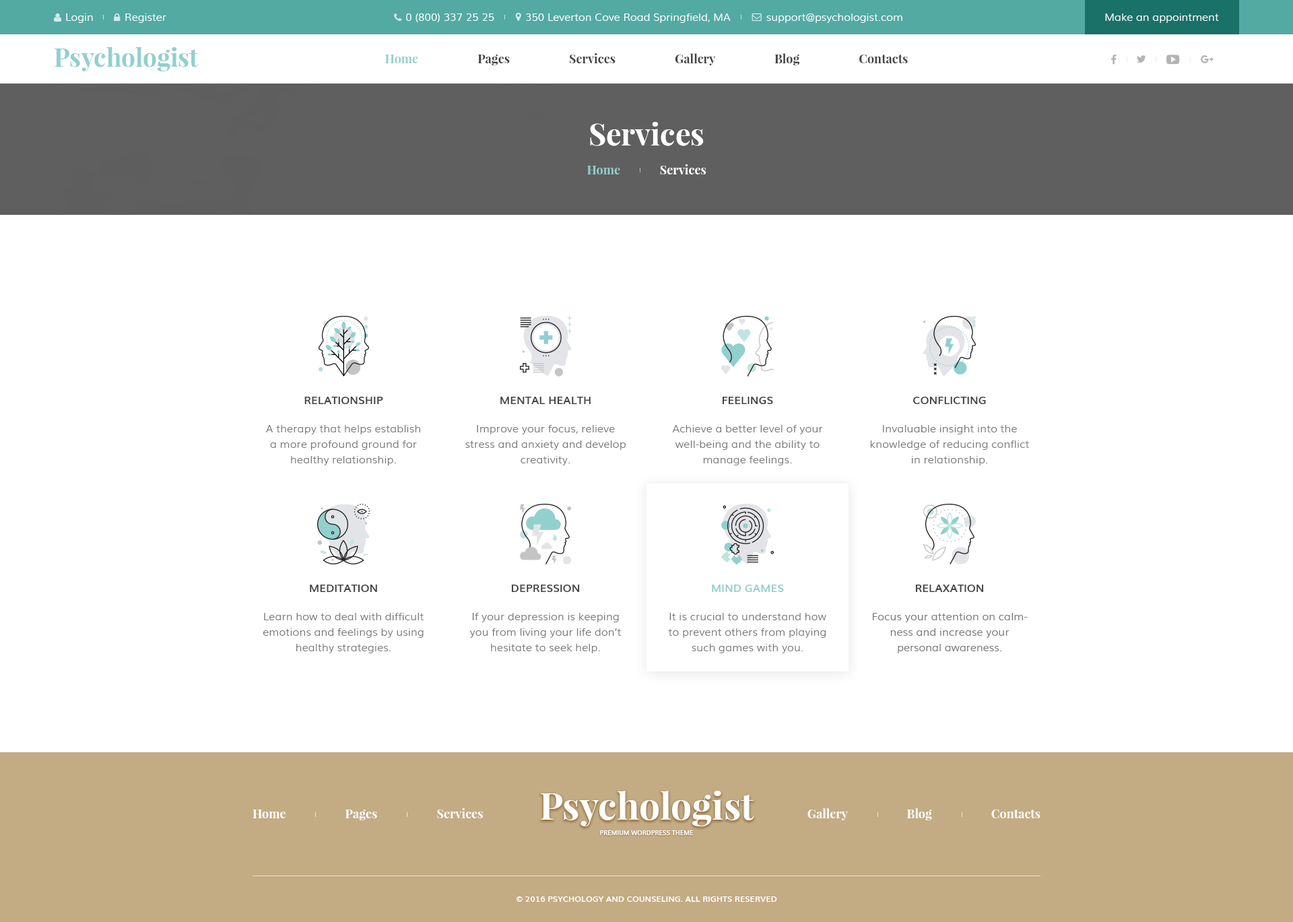
<style>
.page{position:relative;width:1293px;height:922px;background:#ffffff}
.page>*{position:absolute;margin:0}
.t1{font:10.8px "Muli-Light";color:#ffffff}
.t2{font:24.9px "PlayfairDisplay-Bold";color:#91d0cc}
.t3{font:12.1px "PlayfairDisplay-Bold";color:#444444}
.t4{font:12.1px "PlayfairDisplay-Bold";color:#91d0cc}
.t5{font:30.3px "PlayfairDisplay-Bold";color:#ffffff}
.t6{font:12.1px "PlayfairDisplay-Bold";color:#ffffff}
.t7{font:10.8px "Muli-Bold";color:#444444;text-transform:uppercase}
.t8{font:10.8px/15.5px "Muli-Light";color:#787878}
.t9{font:10.8px "Muli-Bold";color:#91d0cc;text-transform:uppercase}
.t10{font:37px "PlayfairDisplay-Bold";color:#ffffff}
.t11{font:6.1px "Muli-Bold";color:#ffffff;text-transform:uppercase}
.t12{font:8.1px "Muli-Bold";color:#ffffff;text-transform:uppercase}
</style>
<div class="page">
<p class="t1" style="left:66px;top:13px;width:27px;height:10px">Login</p>
<p class="t1" style="left:125px;top:13px;width:41px;height:10px">Register</p>
<p class="t1" style="left:406px;top:13px;width:88px;height:9px">0 (800) 337 25 25</p>
<p class="t1" style="left:525px;top:13px;width:206px;height:10px">350 Leverton Cove Road Springfield, MA</p>
<p class="t1" style="left:766px;top:13px;width:137px;height:10px">support@psychologist.com</p>
<p class="t1" style="left:1105px;top:13px;width:114px;height:10px">Make an appointment</p>
<p class="t2" style="left:55px;top:46px;width:144px;height:25px">Psychologist</p>
<p class="t3" style="left:385px;top:53px;width:523px;height:12px"><span class="t4">Home</span>                     Pages                     Services                     Gallery                     Blog                     Contacts</p>
<p class="t5" style="left:590px;top:122px;width:114px;height:24px">Services</p>
<p class="t6" style="left:587px;top:164px;width:120px;height:10px"><span class="t4">Home              </span>Services</p>
<p class="t7" style="left:304px;top:397px;width:79px;height:7px">Relationship</p>
<p class="t7" style="left:500px;top:397px;width:91px;height:7px">mental health</p>
<p class="t7" style="left:722px;top:397px;width:51px;height:7px">feelings</p>
<p class="t7" style="left:913px;top:397px;width:73px;height:7px">conflicting</p>
<p class="t8" style="left:266px;top:425px;width:154px;height:40px;text-align:center">A therapy that helps establish a more profound ground for healthy relationship.</p>
<p class="t8" style="left:465px;top:425px;width:161px;height:40px;text-align:center">Improve your focus, relieve stress and anxiety and develop creativity.</p>
<p class="t8" style="left:672px;top:425px;width:151px;height:40px;text-align:center">Achieve a better level of your  well-being and the ability to manage feelings.</p>
<p class="t8" style="left:870px;top:425px;width:159px;height:40px;text-align:center">Invaluable insight into the knowledge of reducing conflict in relationship.</p>
<p class="t7" style="left:310px;top:585px;width:67px;height:7px">meditation</p>
<p class="t7" style="left:511px;top:585px;width:69px;height:7px">depression</p>
<p class="t9" style="left:712px;top:585px;width:72px;height:7px">mind games</p>
<p class="t7" style="left:915px;top:585px;width:69px;height:7px">relaxation</p>
<p class="t8" style="left:263px;top:613px;width:161px;height:40px;text-align:center">Learn how to deal with difficult emotions and feelings by using healthy strategies.</p>
<p class="t8" style="left:469px;top:613px;width:152px;height:40px;text-align:center">If your depression is keeping you from living your life don’t hesitate to seek help.</p>
<p class="t8" style="left:668px;top:613px;width:158px;height:40px;text-align:center">It is crucial to understand how to prevent others from playing such games with you.</p>
<p class="t8" style="left:873px;top:613px;width:155px;height:40px;text-align:center">Focus your attention on calmness and increase your<br>personal awareness.</p>
<p class="t10" style="left:540px;top:791px;width:214px;height:35px">Psychologist</p>
<p class="t6" style="left:253px;top:808px;width:230px;height:12px">Home                     Pages                     Services</p>
<p class="t6" style="left:808px;top:808px;width:233px;height:12px">Gallery                     Blog                     Contacts</p>
<p class="t11" style="left:600px;top:830px;width:94px;height:5px">Premium Wordpress Theme</p>
<p class="t12" style="left:516px;top:896px;width:261px;height:6px">© 2016 Psychology and Counseling. All rights reserved</p>
</div>
